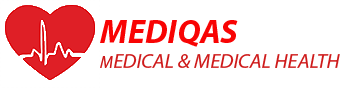
<style>
.page{position:relative;width:350px;height:88px;background:#ffffff}
.page>*{position:absolute;margin:0}
.t1{font:20.8px "MyriadPro-It";color:#ce1a1a}
.t2{font:25px "MyriadPro-BoldIt";color:#f80404}
.t3{font:33.3px "MyriadPro-BoldIt";color:#f80404}
.t4{font:16.7px "MyriadPro-It";color:#ce1a1a}
</style>
<div class="page">
<p class="t1" style="left:100px;top:20px;width:240px;height:48px"><span class="t2">  </span><span class="t3">MEDIQAS<br></span><span class="t4">   M</span>EDICAL &amp; MEDICAL HEALTH</p>
</div>
